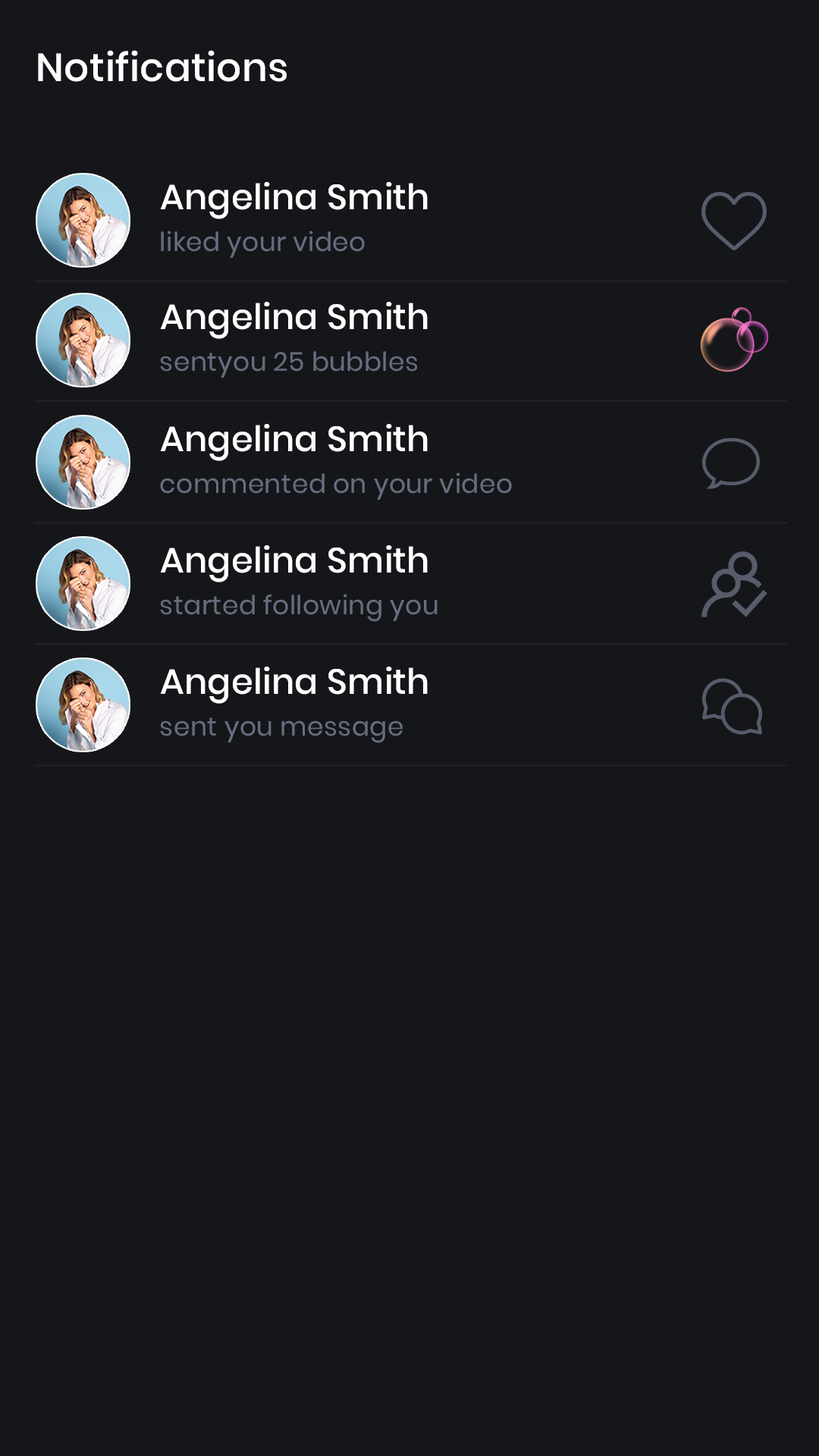
<style>
.page{position:relative;width:819px;height:1456px;background:#15161a}
.page>*{position:absolute;margin:0}
.t1{font:39.3px "Poppins-Medium";letter-spacing:0.01em;color:#ffffff}
.t2{font:35.1px "Poppins-Medium";letter-spacing:0.01em;color:#ffffff}
.t3{font:26.1px "Poppins-Regular";letter-spacing:0.01em;color:#666d7e}
</style>
<div class="page">
<p class="t1" style="left:38px;top:50px;width:249px;height:32px">Notifications</p>
<p class="t2" style="left:160px;top:182px;width:268px;height:37px">Angelina Smith</p>
<p class="t3" style="left:161px;top:231px;width:204px;height:27px">liked your video</p>
<p class="t2" style="left:160px;top:302px;width:268px;height:37px">Angelina Smith</p>
<p class="t3" style="left:160px;top:351px;width:257px;height:27px">sentyou 25 bubbles</p>
<p class="t2" style="left:160px;top:424px;width:268px;height:37px">Angelina Smith</p>
<p class="t3" style="left:160px;top:472px;width:352px;height:28px">commented on your video</p>
<p class="t2" style="left:160px;top:545px;width:268px;height:37px">Angelina Smith</p>
<p class="t3" style="left:160px;top:594px;width:278px;height:28px">started following you</p>
<p class="t2" style="left:160px;top:667px;width:268px;height:37px">Angelina Smith</p>
<p class="t3" style="left:160px;top:717px;width:243px;height:26px">sent you message</p>
</div>
